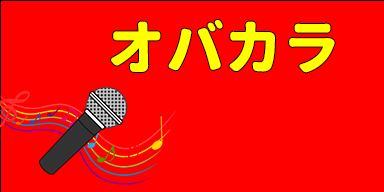
<style>
.page{position:relative;width:384px;height:192px;background:#ff0000}
.page>*{position:absolute;margin:0}
.t1{font:58.3px "GenJyuuGothic-Monospace-Heavy";color:#ffff00}
</style>
<div class="page">
<p class="t1" style="left:111px;top:20px;width:224px;height:53px">オバカラ</p>
</div>
